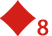
<style>
.page{position:relative;width:52px;height:36px;background:#ffffff}
.page>*{position:absolute;margin:0}
.t1{font:23.4px "MyriadPro-Regular";letter-spacing:-0.1em;color:#d22018;font-weight:bold}
</style>
<div class="page">
<p class="t1" style="left:37px;top:19px;width:12px;height:17px">8</p>
</div>
